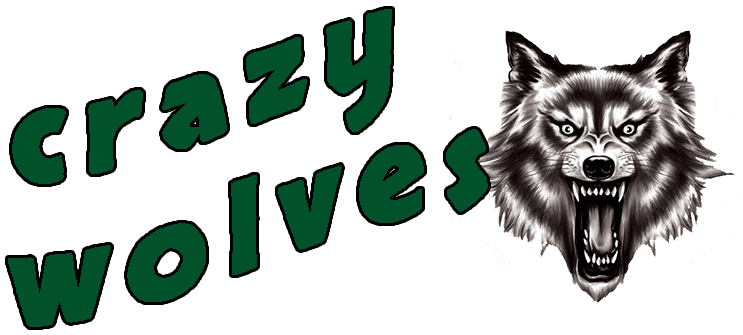
<style>
.page{position:relative;width:743px;height:335px;background:#ffffff}
.page>*{position:absolute;margin:0}
.t1{font:120px "Skranji-Bold";letter-spacing:0.15em;color:#01512b}
</style>
<div class="page">
<p class="t1" style="left:8px;top:9px;width:480px;height:318px;text-align:right">crazy<br>wolves</p>
</div>
